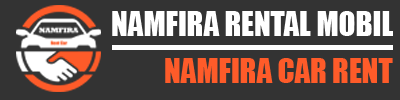
<style>
.page{position:relative;width:400px;height:100px;background:#333333}
.page>*{position:absolute;margin:0}
.t1{font:31px "Impact";color:#ffffff}
.t2{font:31px "Impact";color:#fe5b29}
</style>
<div class="page">
<p class="t1" style="left:112px;top:11px;width:281px;height:25px">NAMFIRA RENTAL MOBIL</p>
<p class="t2" style="left:165px;top:58px;width:228px;height:25px">NAMFIRA CAR RENT</p>
</div>
